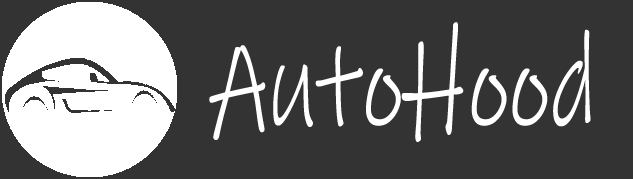
<style>
.page{position:relative;width:633px;height:179px;background:#333333}
.page>*{position:absolute;margin:0}
.t1{font:125px "InkFree";color:#ffffff;scale:0.76 1}
</style>
<div class="page">
<p class="t1" style="left:209px;top:22px;width:382px;height:120px">AutoHood</p>
</div>
